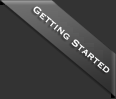
<style>
.page{position:relative;width:116px;height:99px;background:#333333}
.page>*{position:absolute;margin:0}
.t1{font:12px "Copperplate";color:#ffffff}
</style>
<div class="page">
<p class="t1" style="left:33px;top:6px;width:77px;height:67px;rotate:40deg">Getting Started</p>
</div>
